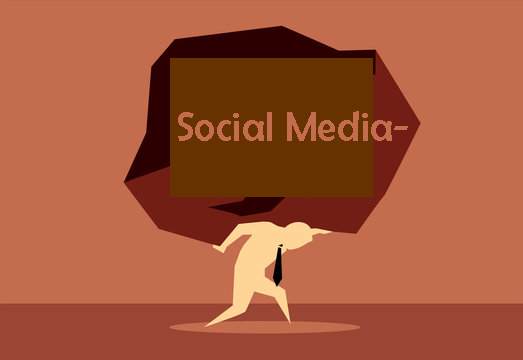
<style>
.page{position:relative;width:523px;height:360px;background:#c36c4e}
.page>*{position:absolute;margin:0}
.t1{font:41.7px "BerlinSansFB-Reg";color:#c36c4e}
.t2{font:58.3px "BerlinSansFB-Reg";color:#c36c4e}
</style>
<div class="page">
<p class="t1" style="left:178px;top:111px;width:230px;height:30px">Social Media<span class="t2">Media</span></p>
</div>
